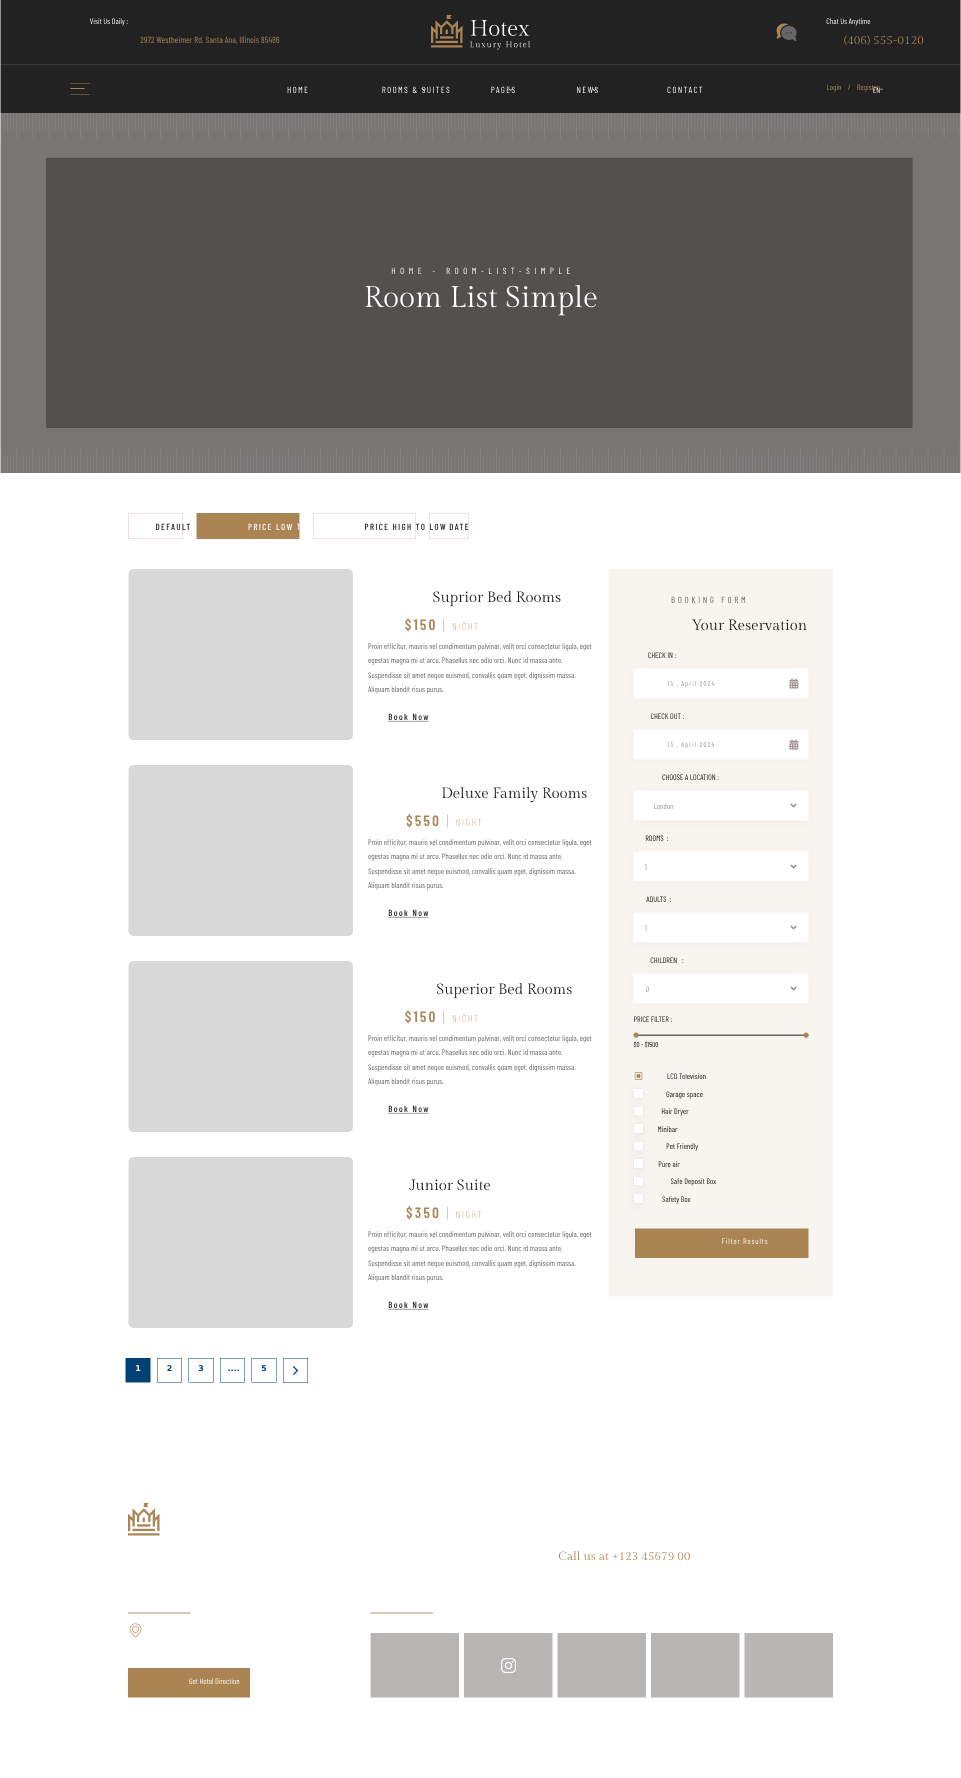
<style>
.page{position:relative;width:961px;height:1778px;background:#ffffff}
.page>*{position:absolute;margin:0}
.t1{font:8px "BarlowCondensed-Regular"}
.t2{font:9px "BarlowCondensed-Regular";color:#aa8453}
.t3{font:12px "GildaDisplay-Regular";color:#aa8453}
.t4{font:9px "BarlowCondensed-Regular";letter-spacing:0.15em;text-transform:uppercase}
.t5{font:9px "BarlowCondensed-Regular";letter-spacing:0.5em;text-transform:uppercase}
.t6{font:30px "GildaDisplay-Regular";color:#ffffff}
.t7{font:9px "BarlowCondensed-Medium";letter-spacing:0.15em;text-transform:uppercase}
.t8{font:9px "BarlowCondensed-Medium";letter-spacing:0.15em;color:#ffffff;text-transform:uppercase}
.t9{font:9px "BarlowCondensed-Medium";letter-spacing:0.15em;color:#222222;text-transform:uppercase}
.t10{font:15px "GildaDisplay-Regular";color:#222222}
.t11{font:9px "BarlowCondensed-Regular";letter-spacing:0.3em;text-transform:uppercase}
.t12{font:10px "BarlowCondensed-Thin";letter-spacing:0.15em;color:#aa8453;text-transform:uppercase}
.t13{font:15px "BarlowCondensed-SemiBold";letter-spacing:0.15em;color:#aa8453;text-transform:uppercase}
.t14{font:15px "BarlowCondensed-Thin";letter-spacing:0.15em;color:#aa8453;text-transform:uppercase}
.t15{font:8px/14.5px "BarlowCondensed-Regular"}
.t16{font:8px "BarlowCondensed-Regular";text-transform:uppercase}
.t17{font:7px "BarlowCondensed-Regular";letter-spacing:0.15em}
.t18{font:9px "BarlowCondensed-Medium";letter-spacing:0.15em;color:#222222;text-decoration:underline}
.t19{font:7px "BarlowCondensed-Regular";text-transform:uppercase}
.t20{font:8px "BarlowCondensed-Regular";letter-spacing:0.1em;color:#ffffff}
.t21{font:8px "RobotoRoman-Bold";color:#ffffff}
.t22{font:8px "RobotoRoman-Bold";color:#004274}
.t23{font:8px "RobotoRoman-Bold"}
</style>
<div class="page">
<p class="t1" style="left:90px;top:18px;width:38px;height:8px">Visit Us Daily :</p>
<p class="t1" style="left:826px;top:18px;width:45px;height:8px">Chat Us Anytime</p>
<p class="t2" style="left:140px;top:36px;width:140px;height:8px">2972 Westheimer Rd. Santa Ana, Illinois 85486</p>
<p class="t3" style="left:844px;top:35px;width:80px;height:11px">(406) 555-0120</p>
<p class="t4" style="left:287px;top:86px;width:21px;height:8px">Home</p>
<p class="t4" style="left:382px;top:86px;width:68px;height:8px">Rooms &amp; Suites</p>
<p class="t4" style="left:491px;top:86px;width:24px;height:8px">Pages</p>
<p class="t4" style="left:577px;top:86px;width:21px;height:8px">News</p>
<p class="t4" style="left:667px;top:86px;width:36px;height:8px">Contact</p>
<p class="t1" style="left:827px;top:84px;width:53px;height:8px">Login    /    Register</p>
<p class="t1" style="left:873px;top:87px;width:7px;height:6px">EN</p>
<p class="t5" style="left:391px;top:267px;width:179px;height:8px">Home - room-list-simple</p>
<p class="t6" style="left:365px;top:284px;width:232px;height:32px">Room List Simple</p>
<p class="t7" style="left:156px;top:523px;width:34px;height:8px">Default</p>
<p class="t8" style="left:248px;top:523px;width:81px;height:8px">Price Low to High</p>
<p class="t9" style="left:365px;top:523px;width:81px;height:8px">Price High to Low</p>
<p class="t9" style="left:449px;top:523px;width:20px;height:7px">Date</p>
<p class="t10" style="left:433px;top:590px;width:128px;height:17px">Suprior Bed Rooms</p>
<p class="t11" style="left:671px;top:596px;width:75px;height:8px">Booking Form</p>
<p class="t12" style="left:405px;top:618px;width:73px;height:14px"><span class="t13">$150 </span><span class="t14">| </span>Night</p>
<p class="t10" style="left:691px;top:619px;width:116px;height:12px">Your Reservation</p>
<p class="t15" style="left:368px;top:643px;width:224px;height:51px">Proin efficitur, mauris vel condimentum pulvinar, velit orci consectetur ligula, eget egestas magna mi ut arcu. Phasellus nec odio orci. Nunc id massa ante. Suspendisse sit amet neque euismod, convallis quam eget, dignissim massa. Aliquam blandit risus purus.</p>
<p class="t16" style="left:648px;top:652px;width:28px;height:7px">Check in :</p>
<p class="t17" style="left:667px;top:681px;width:48px;height:7px">13 , April 2024</p>
<p class="t18" style="left:388px;top:713px;width:41px;height:9px">Book Now</p>
<p class="t16" style="left:650px;top:713px;width:34px;height:7px">Check Out :</p>
<p class="t17" style="left:667px;top:742px;width:48px;height:7px">13 , April 2024</p>
<p class="t16" style="left:662px;top:774px;width:57px;height:7px">Choose a location :</p>
<p class="t10" style="left:442px;top:786px;width:145px;height:17px">Deluxe Family Rooms</p>
<p class="t1" style="left:654px;top:803px;width:20px;height:7px">London</p>
<p class="t12" style="left:406px;top:814px;width:76px;height:14px"><span class="t13">$550 </span><span class="t14">| </span>Night</p>
<p class="t15" style="left:368px;top:839px;width:224px;height:51px">Proin efficitur, mauris vel condimentum pulvinar, velit orci consectetur ligula, eget egestas magna mi ut arcu. Phasellus nec odio orci. Nunc id massa ante. Suspendisse sit amet neque euismod, convallis quam eget, dignissim massa. Aliquam blandit risus purus.</p>
<p class="t16" style="left:645px;top:835px;width:24px;height:7px">Rooms  :</p>
<p class="t1" style="left:644px;top:864px;width:3px;height:6px">1</p>
<p class="t16" style="left:646px;top:896px;width:25px;height:7px">adults  :</p>
<p class="t18" style="left:388px;top:909px;width:41px;height:9px">Book Now</p>
<p class="t1" style="left:644px;top:925px;width:3px;height:6px">1</p>
<p class="t16" style="left:650px;top:957px;width:34px;height:7px">Children   :</p>
<p class="t10" style="left:437px;top:982px;width:135px;height:17px">Superior Bed Rooms</p>
<p class="t1" style="left:645px;top:986px;width:4px;height:7px">0</p>
<p class="t12" style="left:405px;top:1010px;width:73px;height:14px"><span class="t13">$150 </span><span class="t14">| </span>Night</p>
<p class="t16" style="left:634px;top:1016px;width:38px;height:7px">Price filter :</p>
<p class="t15" style="left:368px;top:1035px;width:224px;height:51px">Proin efficitur, mauris vel condimentum pulvinar, velit orci consectetur ligula, eget egestas magna mi ut arcu. Phasellus nec odio orci. Nunc id massa ante. Suspendisse sit amet neque euismod, convallis quam eget, dignissim massa. Aliquam blandit risus purus.</p>
<p class="t19" style="left:633px;top:1041px;width:25px;height:7px">$0 - $1500</p>
<p class="t1" style="left:667px;top:1073px;width:39px;height:7px">LCD Television</p>
<p class="t1" style="left:666px;top:1091px;width:37px;height:8px">Garage space</p>
<p class="t18" style="left:388px;top:1105px;width:41px;height:9px">Book Now</p>
<p class="t1" style="left:661px;top:1108px;width:28px;height:8px">Hair Dryer</p>
<p class="t1" style="left:658px;top:1126px;width:20px;height:7px">Minibar</p>
<p class="t1" style="left:666px;top:1143px;width:32px;height:8px">Pet Friendly</p>
<p class="t1" style="left:658px;top:1161px;width:22px;height:7px">Pure air</p>
<p class="t10" style="left:409px;top:1179px;width:82px;height:12px">Junior Suite</p>
<p class="t1" style="left:670px;top:1178px;width:47px;height:8px">Safe Deposit Box</p>
<p class="t12" style="left:406px;top:1206px;width:76px;height:14px"><span class="t13">$350 </span><span class="t14">| </span>Night</p>
<p class="t1" style="left:662px;top:1196px;width:29px;height:8px">Safety Box</p>
<p class="t15" style="left:368px;top:1231px;width:224px;height:51px">Proin efficitur, mauris vel condimentum pulvinar, velit orci consectetur ligula, eget egestas magna mi ut arcu. Phasellus nec odio orci. Nunc id massa ante. Suspendisse sit amet neque euismod, convallis quam eget, dignissim massa. Aliquam blandit risus purus.</p>
<p class="t20" style="left:722px;top:1238px;width:46px;height:7px">Filter Results</p>
<p class="t18" style="left:388px;top:1301px;width:41px;height:9px">Book Now</p>
<p class="t21" style="left:136px;top:1365px;width:5px;height:6px">1</p>
<p class="t22" style="left:167px;top:1365px;width:5px;height:6px">2</p>
<p class="t22" style="left:198px;top:1365px;width:6px;height:7px">3</p>
<p class="t23" style="left:228px;top:1369px;width:11px;height:2px">....</p>
<p class="t22" style="left:261px;top:1365px;width:6px;height:7px">5</p>
<p class="t3" style="left:558px;top:1551px;width:132px;height:10px">Call us at +123 45679 00</p>
<p class="t1" style="left:189px;top:1678px;width:51px;height:7px">Get Hotel Direction</p>
</div>
